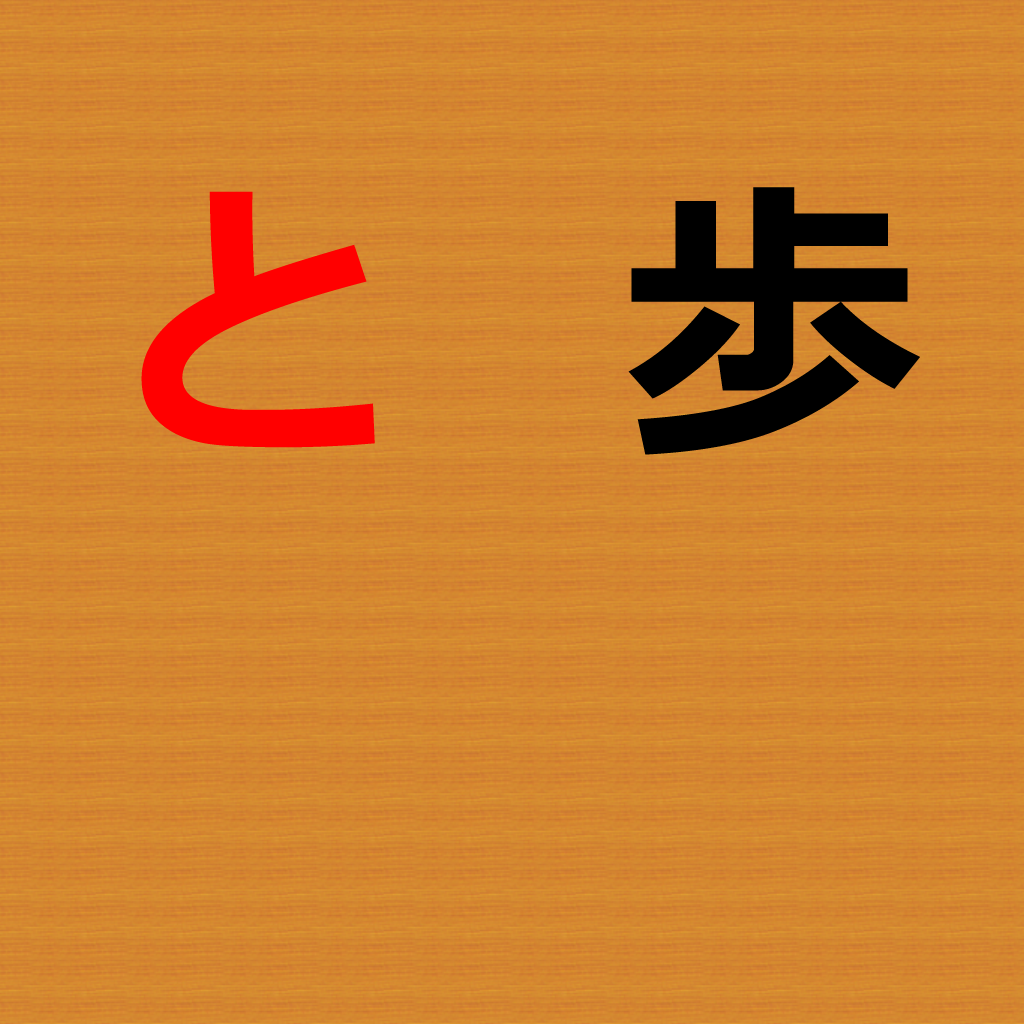
<style>
.page{position:relative;width:1024px;height:1024px}
.page>*{position:absolute;margin:0}
.t1{font:298.5px "Meiryo-Bold";color:#ff0000}
.t2{font:301.5px "Meiryo-Bold";color:#000000}
</style>
<div class="page">
<p class="t1" style="left:141px;top:191px;width:234px;height:257px">と</p>
<p class="t2" style="left:628px;top:187px;width:292px;height:268px">歩</p>
</div>
